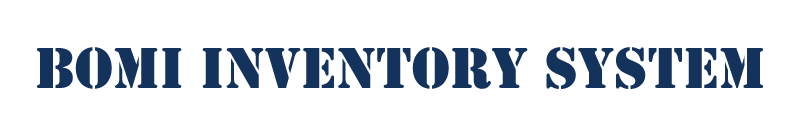
<style>
.page{position:relative;width:800px;height:139px;background:#ffffff}
.page>*{position:absolute;margin:0}
.t1{font:60px "Army";color:#14335c}
</style>
<div class="page">
<p class="t1" style="left:37px;top:47px;width:726px;height:42px">Bomi Inventory System</p>
</div>
